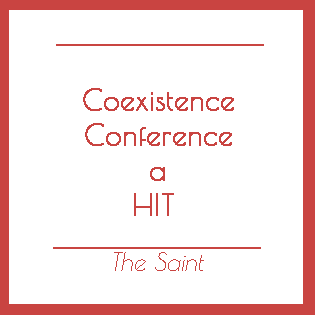
<style>
.page{position:relative;width:315px;height:315px;background:#ffffff}
.page>*{position:absolute;margin:0}
.t1{font:29.2px "PoiretOne-Regular";color:#c94441;font-weight:bold}
.t2{font:25px "PoiretOne-Regular";color:#c94441;font-style:italic}
</style>
<div class="page">
<p class="t1" style="left:83px;top:88px;width:151px;height:128px;text-align:center">Coexistence<br>Conference<br>a<br>HIT</p>
<p class="t2" style="left:114px;top:252px;width:90px;height:19px">The Saint</p>
</div>
